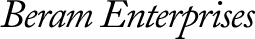
<style>
.page{position:relative;width:255px;height:39px;background:#ffffff}
.page>*{position:absolute;margin:0}
.t1{font:40px "ACaslonPro-Italic";letter-spacing:-0.04em;color:#000000}
</style>
<div class="page">
<p class="t1" style="left:0px;top:0px;width:255px;height:39px">Beram Enterprises</p>
</div>
